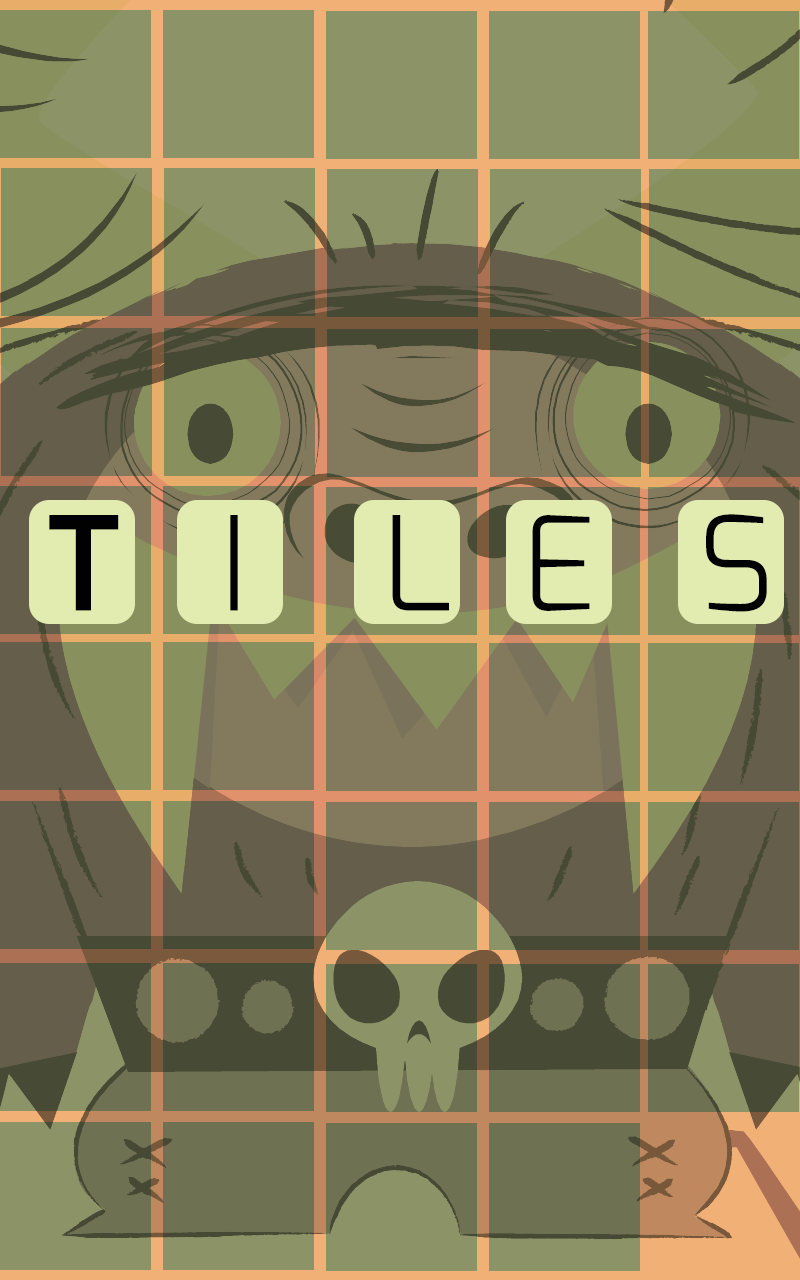
<style>
.page{position:relative;width:800px;height:1280px}
.page>*{position:absolute;margin:0}
.t1{font:130px "Exo-Light";color:#010101}
.t2{font:130px "Exo-DemiBold";color:#010101}
</style>
<div class="page">
<p class="t1" style="left:49px;top:514px;width:718px;height:98px"><span class="t2">T   </span>I    L  E   S</p>
</div>
